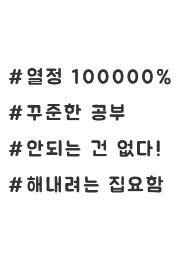
<style>
.page{position:relative;width:180px;height:260px;background:#ffffff}
.page>*{position:absolute;margin:0}
.t1{font:20px/36px "BMJUA";letter-spacing:0.125em;color:#333333}
</style>
<div class="page">
<p class="t1" style="left:9px;top:68px;width:162px;height:125px">#열정 100000%<br>#꾸준한 공부<br>#안되는 건 없다!<br>#해내려는 집요함</p>
</div>
